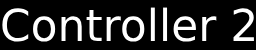
<style>
.page{position:relative;width:256px;height:50px;background:#000000}
.page>*{position:absolute;margin:0}
.t1{font:44px "DejaVuSans";color:#ffffff}
</style>
<div class="page">
<p class="t1" style="left:2px;top:7px;width:252px;height:35px">Controller 2</p>
</div>
